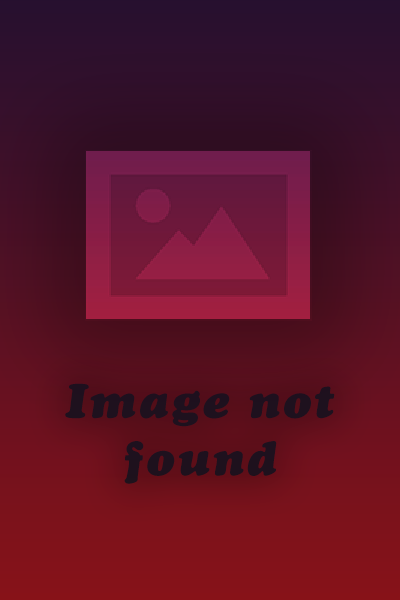
<style>
.page{position:relative;width:400px;height:600px}
.page>*{position:absolute;margin:0}
.t1{font:47.9px "CooperBlackStd-Italic";letter-spacing:0.045em;color:#0f0f0f}
</style>
<div class="page">
<p class="t1" style="left:65px;top:383px;width:270px;height:101px;text-align:center">Image not found</p>
</div>
